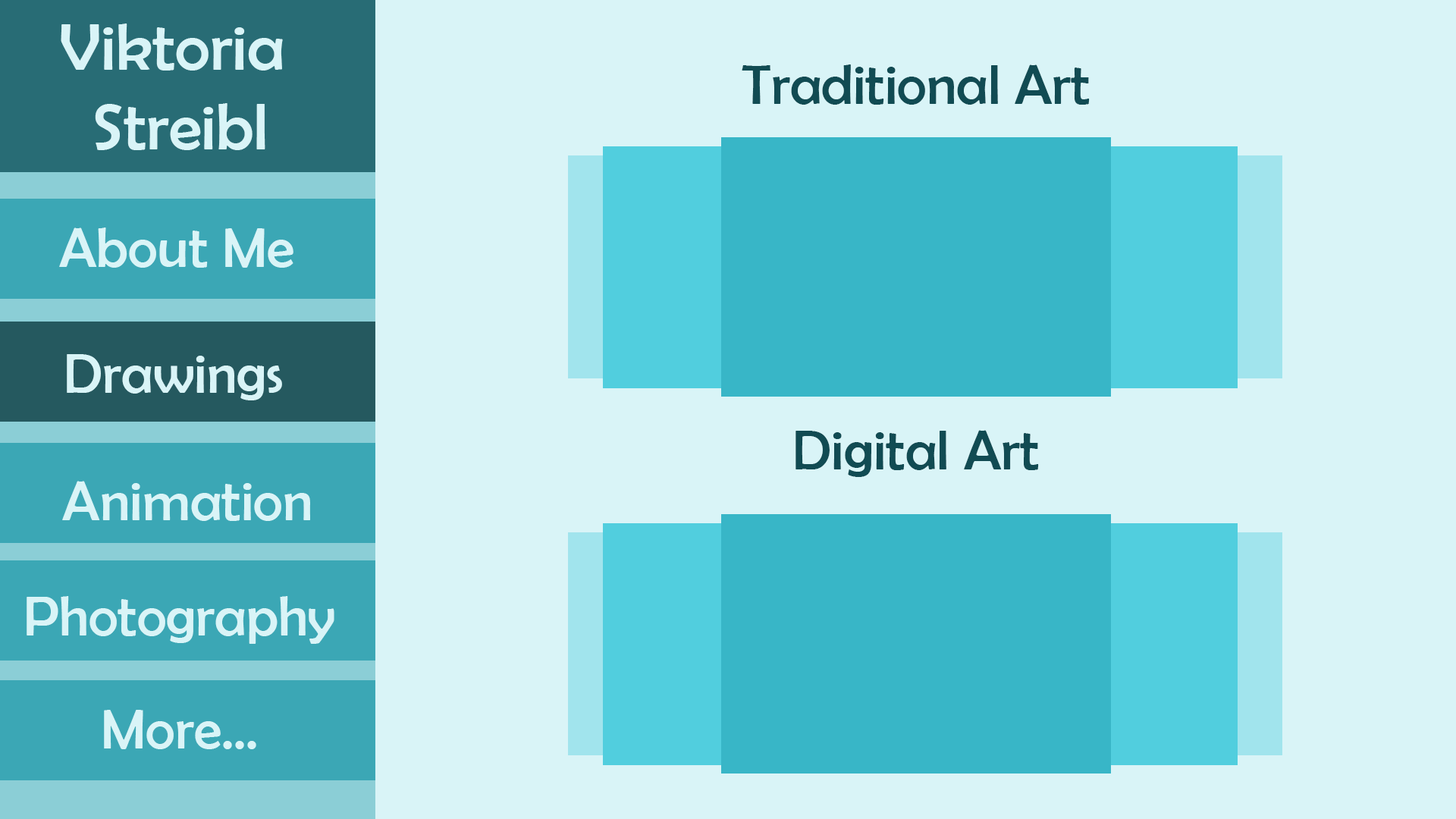
<style>
.page{position:relative;width:1456px;height:819px;background:#d9f4f7}
.page>*{position:absolute;margin:0}
.t1{font:66.3px "BerlinSansFB-Reg";color:#d9f4f7}
.t2{font:56.9px "BerlinSansFB-Reg";color:#114b53}
.t3{font:56.9px "BerlinSansFB-Reg";color:#d9f4f7}
</style>
<div class="page">
<p class="t1" style="left:61px;top:24px;width:222px;height:126px;text-align:center">Viktoria <br>Streibl</p>
<p class="t2" style="left:742px;top:64px;width:348px;height:41px">Traditional Art</p>
<p class="t3" style="left:59px;top:227px;width:234px;height:41px">About Me</p>
<p class="t3" style="left:67px;top:354px;width:215px;height:46px">Drawings</p>
<p class="t2" style="left:795px;top:430px;width:244px;height:47px">Digital Art</p>
<p class="t3" style="left:62px;top:481px;width:248px;height:40px">Animation</p>
<p class="t3" style="left:27px;top:596px;width:307px;height:48px">Photography</p>
<p class="t3" style="left:104px;top:710px;width:152px;height:39px">More...</p>
</div>
